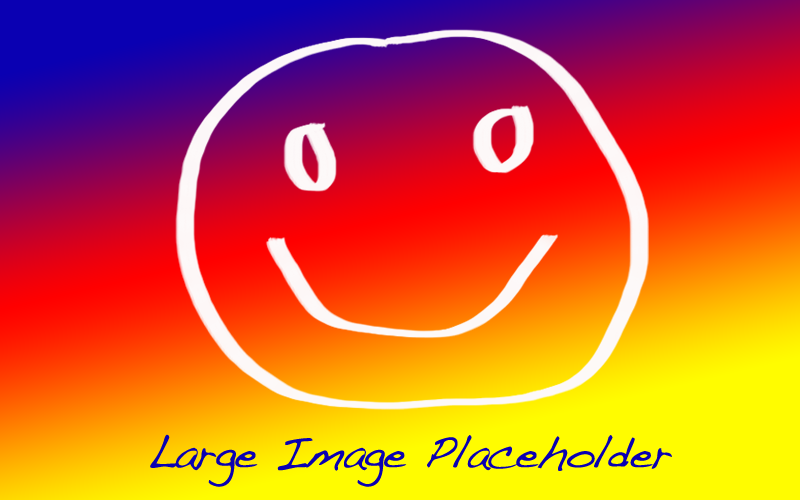
<style>
.page{position:relative;width:800px;height:500px}
.page>*{position:absolute;margin:0}
.t1{font:46.3px "Handwriting-Dakota";letter-spacing:-0.025em;color:#0a00b2}
</style>
<div class="page">
<p class="t1" style="left:150px;top:434px;width:522px;height:53px">Large Image Placeholder</p>
</div>
